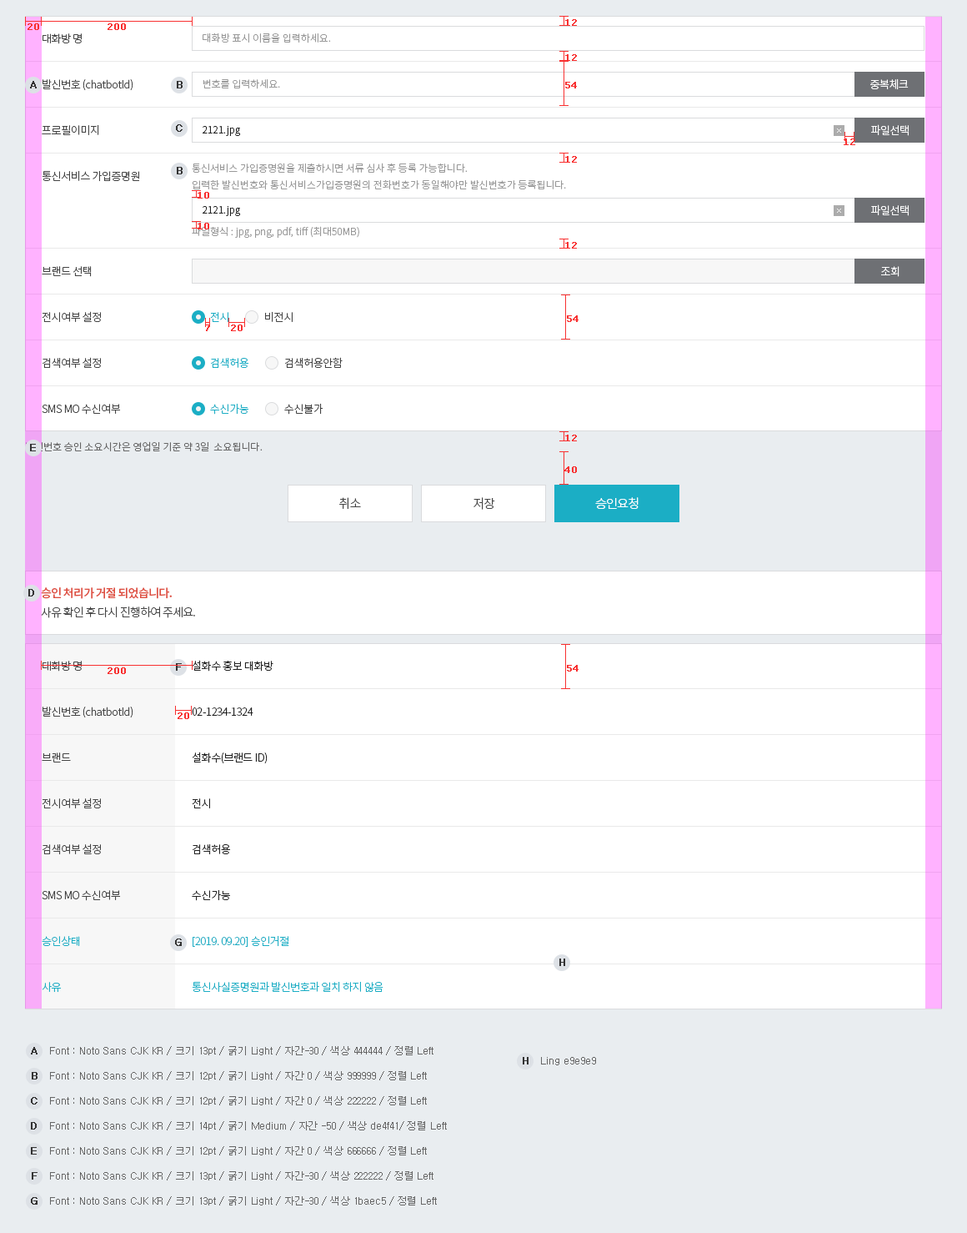
<style>
.page{position:relative;width:967px;height:1233px;background:#ffffff}
.page>*{position:absolute;margin:0}
.t1{font:9.2px "Verdana";color:#f83030;font-weight:bold}
.t2{font:10.8px/45.9px "NotoSansCJKkr-Light";letter-spacing:-0.03em;color:#444444}
.t3{font:10px "NotoSansCJKkr-Light";color:#999999}
.t4{font:10.8px "NotoSansCJKkr-Light";letter-spacing:-0.03em;color:#ffffff}
.t5{font:10px "NotoSansCJKkr-Light";color:#222222}
.t6{font:10px/16.7px "NotoSansCJKkr-Light";color:#999999}
.t7{font:10.8px "NotoSansCJKkr-Light";letter-spacing:-0.03em;color:#1baec5}
.t8{font:10.8px "NotoSansCJKkr-Light";letter-spacing:-0.03em;color:#444444}
.t9{font:10px "NotoSansCJKkr-Light";color:#666666}
.t10{font:12.5px "NotoSansCJKkr-Light";letter-spacing:-0.05em;color:#444444}
.t11{font:12.5px "NotoSansCJKkr-Light";letter-spacing:-0.05em;color:#ffffff}
.t12{font:11.7px/19.2px "NotoSansCJKkr-Light";letter-spacing:-0.05em;color:#444444}
.t13{font:11.7px/19.2px "NotoSansCJKkr-Medium";letter-spacing:-0.05em;color:#de4f41}
.t14{font:10.8px/45.9px "NotoSansCJKkr-Light";letter-spacing:-0.03em;color:#1baec5}
.t15{font:10.8px/45.9px "NotoSansCJKkr-Light";letter-spacing:-0.03em;color:#222222}
.t16{font:10px "Dotum";color:#323232;font-weight:bold}
.t17{font:10px "Dotum";color:#666666}
.t18{font:10px "Dotum";color:#323232;text-transform:uppercase;font-weight:bold}
</style>
<div class="page">
<p class="t1" style="left:28px;top:23px;width:11px;height:7px">20</p>
<p class="t1" style="left:108px;top:23px;width:18px;height:7px">200</p>
<p class="t1" style="left:565px;top:19px;width:12px;height:7px">12</p>
<p class="t2" style="left:42px;top:33px;width:97px;height:149px">대화방 명<br>발신번호 (chatbotId)<br>프로필이미지<br>통신서비스 가입증명원</p>
<p class="t3" style="left:203px;top:33px;width:128px;height:10px">대화방 표시 이름을 입력하세요.</p>
<p class="t3" style="left:203px;top:79px;width:77px;height:10px">번호를 입력하세요.</p>
<p class="t1" style="left:565px;top:82px;width:12px;height:6px">54</p>
<p class="t4" style="left:871px;top:78px;width:38px;height:12px">중복체크</p>
<p class="t5" style="left:203px;top:126px;width:38px;height:10px">2121.jpg</p>
<p class="t4" style="left:871px;top:124px;width:38px;height:12px">파일선택</p>
<p class="t1" style="left:844px;top:138px;width:12px;height:7px">12</p>
<p class="t6" style="left:192px;top:163px;width:374px;height:27px">통신서비스 가입증명원을 제출하시면 서류 심사 후 등록 가능합니다.  <br>입력한 발신번호와 통신서비스가입증명원의 전화번호가 동일해야만 발신번호가 등록됩니다.</p>
<p class="t1" style="left:198px;top:192px;width:11px;height:6px">10</p>
<p class="t5" style="left:203px;top:206px;width:38px;height:10px">2121.jpg</p>
<p class="t4" style="left:871px;top:204px;width:38px;height:12px">파일선택</p>
<p class="t3" style="left:192px;top:226px;width:167px;height:12px">파일형식 : jpg, png, pdf, tiff (최대50MB)</p>
<p class="t1" style="left:198px;top:223px;width:11px;height:6px">10</p>
<p class="t2" style="left:42px;top:266px;width:79px;height:148px">브랜드 선택<br>전시여부 설정<br>검색여부 설정<br>SMS MO 수신여부</p>
<p class="t4" style="left:882px;top:266px;width:18px;height:11px">조회</p>
<p class="t7" style="left:210px;top:312px;width:19px;height:10px">전시</p>
<p class="t8" style="left:265px;top:311px;width:28px;height:11px">비전시</p>
<p class="t1" style="left:567px;top:315px;width:12px;height:7px">54</p>
<p class="t1" style="left:205px;top:324px;width:5px;height:7px">7</p>
<p class="t1" style="left:231px;top:324px;width:12px;height:7px">20</p>
<p class="t7" style="left:211px;top:358px;width:38px;height:11px">검색허용</p>
<p class="t8" style="left:285px;top:357px;width:58px;height:12px">검색허용안함</p>
<p class="t7" style="left:210px;top:403px;width:39px;height:11px">수신가능</p>
<p class="t8" style="left:284px;top:403px;width:40px;height:11px">수신불가</p>
<p class="t9" style="left:26px;top:441px;width:237px;height:10px">발신번호 승인 소요시간은 영업일 기준 약 3일  소요됩니다.</p>
<p class="t1" style="left:565px;top:466px;width:12px;height:7px">40</p>
<p class="t10" style="left:339px;top:497px;width:22px;height:12px">취소</p>
<p class="t10" style="left:474px;top:497px;width:21px;height:13px">저장</p>
<p class="t11" style="left:595px;top:497px;width:44px;height:12px">승인요청</p>
<p class="t12" style="left:41px;top:587px;width:154px;height:31px"><span class="t13">승인 처리가 거절 되었습니다.<br></span>사유 확인 후 다시 진행하여 주세요.</p>
<p class="t2" style="left:42px;top:661px;width:91px;height:331px">대화방 명<br>발신번호 (chatbotId)<br>브랜드<br>전시여부 설정<br>검색여부 설정<br>SMS MO 수신여부<br><span class="t14">승인상태<br>사유</span></p>
<p class="t15" style="left:192px;top:660px;width:192px;height:332px">설화수 홍보 대화방<br>02-1234-1324<br>설화수(브랜드 ID)<br>전시<br>검색허용<br>수신가능<br><span class="t14">[2019. 09.20] 승인거절<br>통신사실증명원과 발신번호과 일치 하지 않음</span></p>
<p class="t1" style="left:178px;top:712px;width:11px;height:7px">20</p>
<p class="t16" style="left:31px;top:1047px;width:7px;height:7px">A</p>
<p class="t17" style="left:50px;top:1046px;width:384px;height:9px">Font : Noto Sans CJK KR / 크기 13pt / 굵기 Light / 자간-30 / 색상 444444 / 정렬 Left</p>
<p class="t16" style="left:523px;top:1057px;width:6px;height:7px">H</p>
<p class="t17" style="left:541px;top:1057px;width:55px;height:8px">Ling e9e9e9</p>
<p class="t16" style="left:32px;top:1072px;width:6px;height:7px">B</p>
<p class="t17" style="left:50px;top:1071px;width:377px;height:9px">Font : Noto Sans CJK KR / 크기 12pt / 굵기 Light / 자간 0 / 색상 999999 / 정렬 Left</p>
<p class="t18" style="left:31px;top:1097px;width:7px;height:7px">c</p>
<p class="t17" style="left:50px;top:1096px;width:377px;height:9px">Font : Noto Sans CJK KR / 크기 12pt / 굵기 Light / 자간 0 / 색상 222222 / 정렬 Left</p>
<p class="t18" style="left:31px;top:1122px;width:6px;height:7px">d</p>
<p class="t17" style="left:50px;top:1121px;width:397px;height:9px">Font : Noto Sans CJK KR / 크기 14pt / 굵기 Medium / 자간 -50 / 색상 de4f41/ 정렬 Left</p>
<p class="t17" style="left:50px;top:1146px;width:377px;height:9px">Font : Noto Sans CJK KR / 크기 12pt / 굵기 Light / 자간 0 / 색상 666666 / 정렬 Left</p>
<p class="t18" style="left:31px;top:1147px;width:6px;height:7px">e</p>
<p class="t18" style="left:32px;top:1172px;width:6px;height:7px">f</p>
<p class="t17" style="left:50px;top:1171px;width:384px;height:9px">Font : Noto Sans CJK KR / 크기 13pt / 굵기 Light / 자간-30 / 색상 222222 / 정렬 Left</p>
<p class="t18" style="left:31px;top:1197px;width:7px;height:7px">g</p>
<p class="t17" style="left:50px;top:1196px;width:387px;height:9px">Font : Noto Sans CJK KR / 크기 13pt / 굵기 Light / 자간-30 / 색상 1baec5 / 정렬 Left</p>
</div>
